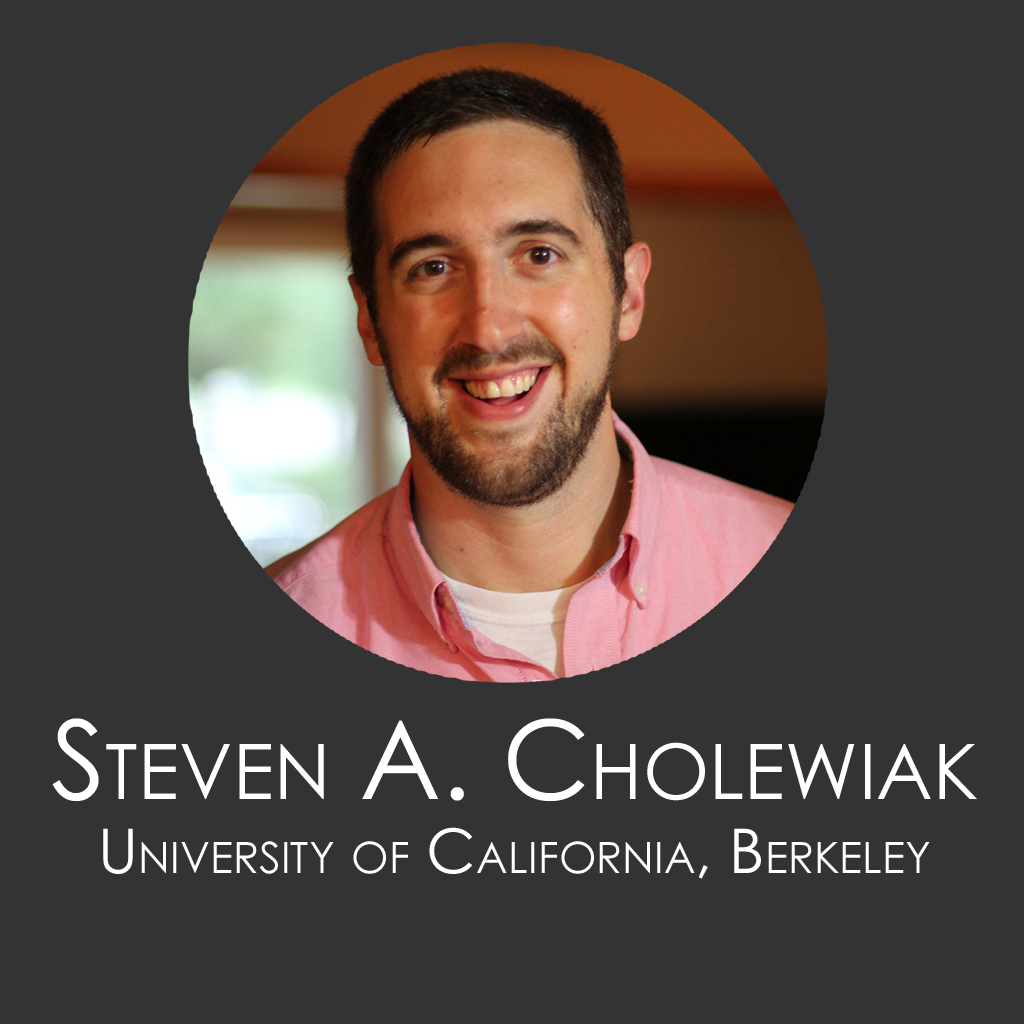
<style>
.page{position:relative;width:1024px;height:1024px;background:#333333}
.page>*{position:absolute;margin:0}
.t1{font:61.4px "CenturyGothic";color:#ffffff;font-variant:small-caps}
.t2{font:109.2px "CenturyGothic";color:#ffffff;font-variant:small-caps}
</style>
<div class="page">
<p class="t1" style="left:52px;top:718px;width:925px;height:161px;text-align:center"><span class="t2">Steven A. Cholewiak<br></span>University of California, Berkeley</p>
</div>
